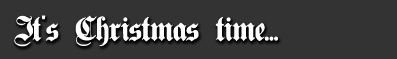
<style>
.page{position:relative;width:397px;height:59px;background:#333333}
.page>*{position:absolute;margin:0}
.t1{font:30px "PlainGermanica";color:#ffffff}
</style>
<div class="page">
<p class="t1" style="left:14px;top:15px;width:264px;height:32px">It's Christmas time...</p>
</div>
